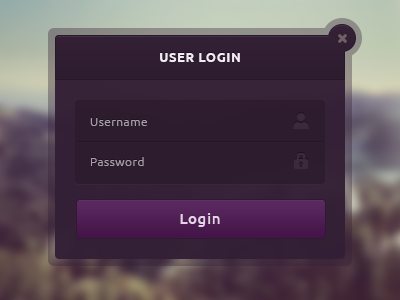
<style>
.page{position:relative;width:400px;height:300px}
.page>*{position:absolute;margin:0}
.t1{font:13px "Ubuntu-Bold";letter-spacing:0.04em;color:#f3ebf3}
.t2{font:12px "Ubuntu-Light";letter-spacing:0.04em;color:#a89ea9}
.t3{font:15px "Ubuntu-Medium";letter-spacing:0.04em;color:#e5d2e6}
</style>
<div class="page">
<p class="t1" style="left:160px;top:53px;width:80px;height:9px">USER LOGIN</p>
<p class="t2" style="left:90px;top:118px;width:57px;height:8px">Username</p>
<p class="t2" style="left:91px;top:157px;width:53px;height:9px">Password</p>
<p class="t3" style="left:180px;top:213px;width:40px;height:14px">Login</p>
</div>
